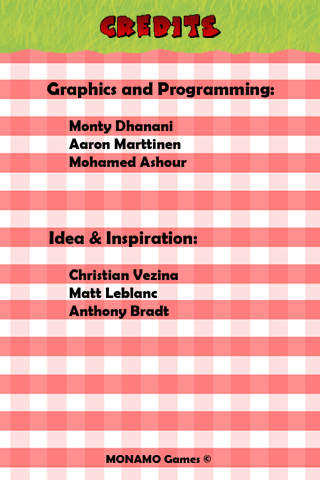
<style>
.page{position:relative;width:320px;height:480px}
.page>*{position:absolute;margin:0}
.t1{font:18px "BerlinSansFBDemi-Bold";color:#000000}
.t2{font:15px "BerlinSansFBDemi-Bold";color:#000000}
.t3{font:12px "BerlinSansFBDemi-Bold";color:#000000}
</style>
<div class="page">
<p class="t1" style="left:47px;top:82px;width:227px;height:16px">Graphics and Programming:</p>
<p class="t2" style="left:69px;top:120px;width:118px;height:47px">Monty Dhanani<br>Aaron Marttinen<br>Mohamed Ashour</p>
<p class="t1" style="left:49px;top:231px;width:148px;height:16px">Idea &amp; Inspiration:</p>
<p class="t2" style="left:69px;top:269px;width:109px;height:50px">Christian Vezina<br>Matt Leblanc<br>Anthony Bradt</p>
<p class="t3" style="left:106px;top:455px;width:105px;height:8px">MONAMO Games ©</p>
</div>
